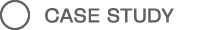
<style>
.page{position:relative;width:205px;height:30px;background:#ffffff}
.page>*{position:absolute;margin:0}
.t1{font:20px "PPTelegraf-Regular";letter-spacing:0.026em;color:#626161;font-weight:bold}
</style>
<div class="page">
<p class="t1" style="left:45px;top:8px;width:129px;height:15px">CASE STUDY</p>
</div>
